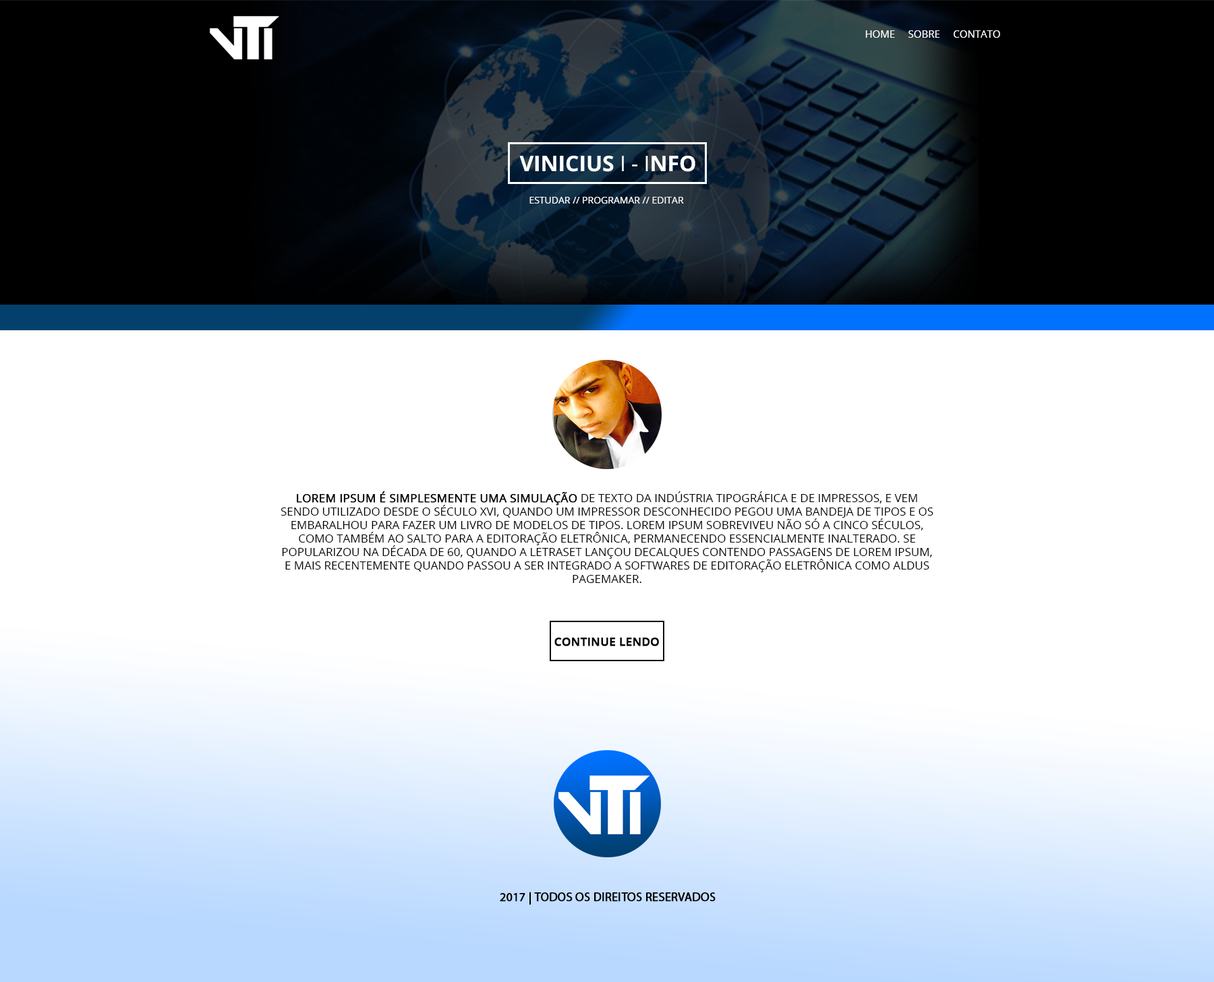
<style>
.page{position:relative;width:1214px;height:982px;background:#ffffff}
.page>*{position:absolute;margin:0}
.t1{font:10.1px "OpenSans";color:#ffffff}
.t2{font:21.4px "OpenSans-Bold";color:#ffffff;text-transform:uppercase}
.t3{font:21.4px "OpenSans";color:#ffffff;text-transform:uppercase}
.t4{font:9.4px "OpenSans";color:#ffffff;text-transform:uppercase}
.t5{font:11.5px/13.5px "OpenSans";color:#000000;text-transform:uppercase}
.t6{font:11.5px/13.5px "OpenSans";color:#000000;text-transform:uppercase;font-weight:bold}
.t7{font:11.5px "OpenSans-Semibold";color:#000000;text-transform:uppercase;font-weight:bold}
.t8{font:12.1px "MyriadPro-Regular";color:#000000;text-transform:uppercase;font-weight:bold}
</style>
<div class="page">
<p class="t1" style="left:865px;top:30px;width:135px;height:8px">HOME     SOBRE     CONTATO</p>
<p class="t2" style="left:519px;top:156px;width:176px;height:16px">Vinicius<span class="t3"> I - I</span>nfo</p>
<p class="t4" style="left:529px;top:197px;width:155px;height:7px">estudar // programar // editar</p>
<p class="t5" style="left:281px;top:492px;width:652px;height:91px;text-align:center"><span class="t6">Lorem Ipsum é simplesmente uma simulação</span> de texto da indústria tipográfica e de impressos, e vem sendo utilizado desde o século XVI, quando um impressor desconhecido pegou uma bandeja de tipos e os embaralhou para fazer um livro de modelos de tipos. Lorem Ipsum sobreviveu não só a cinco séculos, como também ao salto para a editoração eletrônica, permanecendo essencialmente inalterado. Se popularizou na década de 60, quando a Letraset lançou decalques contendo passagens de Lorem Ipsum, e mais recentemente quando passou a ser integrado a softwares de editoração eletrônica como Aldus PageMaker.</p>
<p class="t7" style="left:554px;top:638px;width:105px;height:9px">continue lendo</p>
<p class="t8" style="left:500px;top:892px;width:215px;height:14px">2017 | TODOS OS DIREITOS RESERVADOS</p>
</div>
